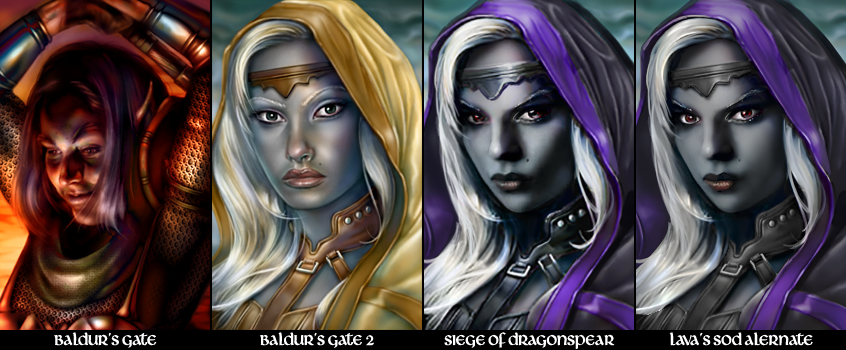
<style>
.page{position:relative;width:846px;height:350px}
.page>*{position:absolute;margin:0}
.t1{font:18px "Livingstone";color:#ffffff}
</style>
<div class="page">
<p class="t1" style="left:54px;top:332px;width:103px;height:16px">Baldur’s Gate</p>
<p class="t1" style="left:260px;top:332px;width:114px;height:16px">Baldur’s Gate 2</p>
<p class="t1" style="left:444px;top:332px;width:171px;height:17px">siege of dragonspear</p>
<p class="t1" style="left:669px;top:332px;width:144px;height:14px">Lava’s SoD Alernate</p>
</div>
